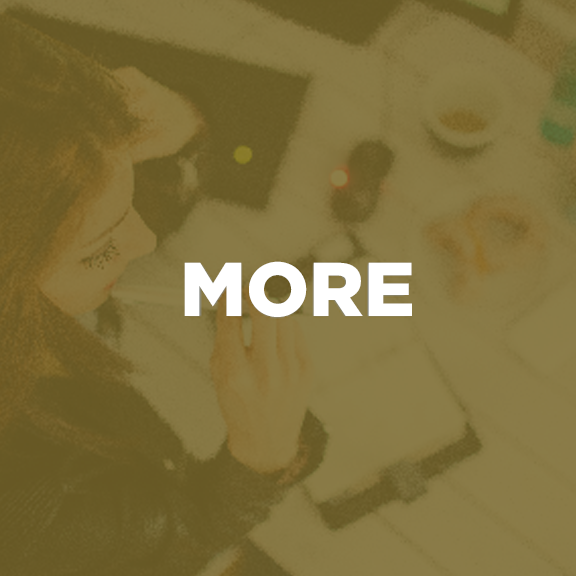
<style>
.page{position:relative;width:576px;height:576px}
.page>*{position:absolute;margin:0}
.t1{font:76px "Gotham-Black";color:#ffffff}
</style>
<div class="page">
<p class="t1" style="left:184px;top:261px;width:228px;height:56px">MORE</p>
</div>
